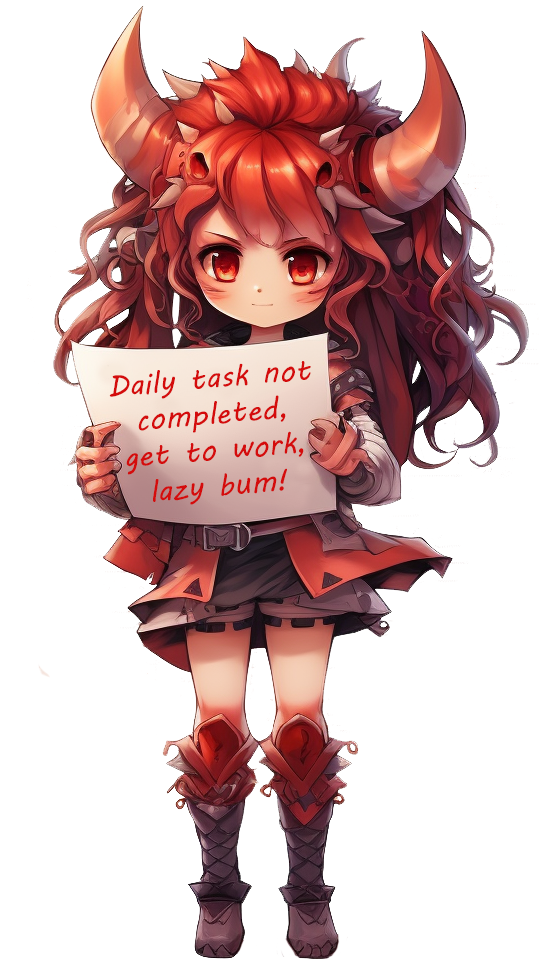
<style>
.page{position:relative;width:539px;height:970px;background:#ffffff}
.page>*{position:absolute;margin:0}
.t1{font:30px "MVBoli";letter-spacing:0.006em;color:#d40c0c}
</style>
<div class="page">
<p class="t1" style="left:109px;top:361px;width:202px;height:144px;text-align:center;rotate:-5deg">Daily task not completed,<br>get to work,<br>lazy bum!</p>
</div>
